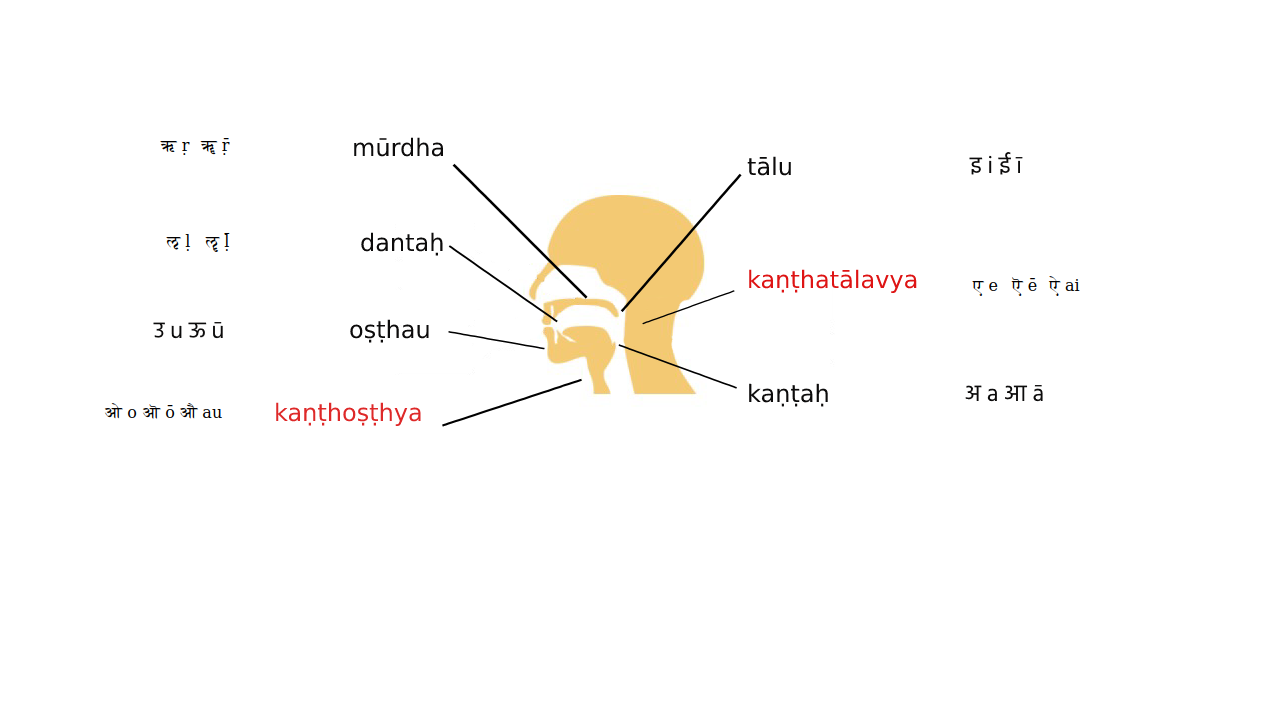
<style>
.page{position:relative;width:1280px;height:720px;background:#ffffff}
.page>*{position:absolute;margin:0}
.t1{font:24px "DejaVuSans";color:#0c0b0b}
.t2{font:24px "Hind-Regular";color:#0c0b0b}
.t3{font:24px "DejaVuSans";color:#de1414}
.t4{font:24px "DejaVuSans";color:#de2929}
</style>
<div class="page">
<p class="t1" style="left:354px;top:137px;width:90px;height:20px">mūrdha</p>
<p class="t1" style="left:747px;top:156px;width:44px;height:20px">tālu</p>
<p class="t2" style="left:969px;top:152px;width:54px;height:23px">इ i ई ī</p>
<p class="t1" style="left:361px;top:232px;width:82px;height:24px">dantaḥ</p>
<p class="t3" style="left:749px;top:269px;width:168px;height:24px">kaṇṭhatālavya</p>
<p class="t2" style="left:153px;top:322px;width:70px;height:17px">उ u ऊ ū</p>
<p class="t1" style="left:350px;top:319px;width:79px;height:24px">oṣṭhau</p>
<p class="t1" style="left:749px;top:383px;width:79px;height:24px">kaṇṭaḥ</p>
<p class="t2" style="left:965px;top:385px;width:78px;height:17px">अ a आ ā</p>
<p class="t4" style="left:276px;top:402px;width:145px;height:24px">kaṇṭhoṣṭhya</p>
</div>
